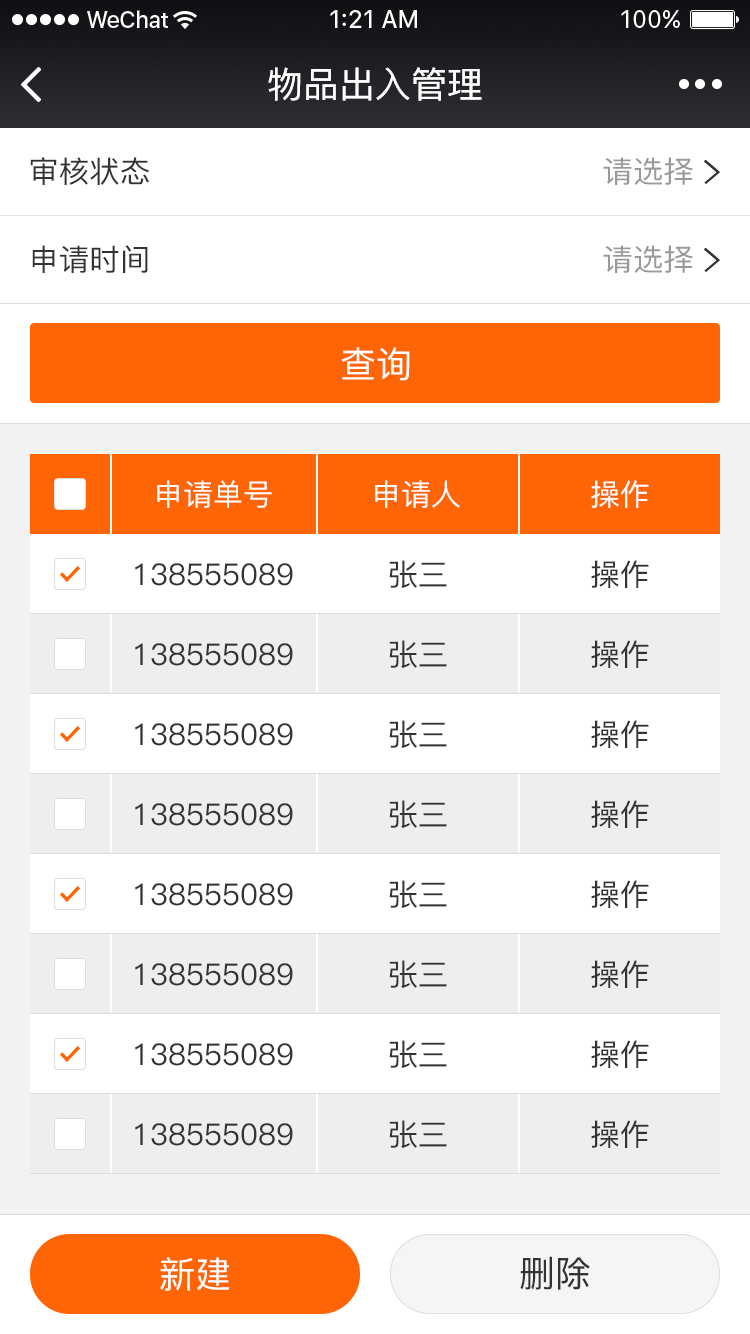
<style>
.page{position:relative;width:750px;height:1334px;background:#ffffff}
.page>*{position:absolute;margin:0}
.t1{font:36px "PingFang-SC-Medium";color:#ffffff}
.t2{font:30px "PingFang-SC-Medium";color:#333333}
.t3{font:30px "PingFang-SC-Medium";color:#999999}
.t4{font:30px "PingFang-SC-Medium";color:#ffffff}
.t5{font:36px "PingFang-SC-Medium";color:#333333}
</style>
<div class="page">
<p class="t1" style="left:268px;top:67px;width:214px;height:34px">物品出入管理</p>
<p class="t2" style="left:30px;top:157px;width:119px;height:28px">审核状态</p>
<p class="t3" style="left:603px;top:157px;width:90px;height:28px">请选择</p>
<p class="t2" style="left:32px;top:245px;width:116px;height:28px">申请时间</p>
<p class="t3" style="left:603px;top:245px;width:90px;height:28px">请选择</p>
<p class="t1" style="left:341px;top:347px;width:69px;height:34px">查询</p>
<p class="t4" style="left:157px;top:480px;width:115px;height:28px">申请单号</p>
<p class="t4" style="left:375px;top:480px;width:85px;height:28px">申请人</p>
<p class="t4" style="left:591px;top:480px;width:58px;height:28px">操作</p>
<p class="t2" style="left:135px;top:563px;width:158px;height:23px">138555089</p>
<p class="t2" style="left:389px;top:560px;width:58px;height:28px">张三</p>
<p class="t2" style="left:591px;top:560px;width:58px;height:28px">操作</p>
<p class="t2" style="left:389px;top:640px;width:58px;height:28px">张三</p>
<p class="t2" style="left:591px;top:640px;width:58px;height:28px">操作</p>
<p class="t2" style="left:135px;top:643px;width:158px;height:23px">138555089</p>
<p class="t2" style="left:135px;top:723px;width:158px;height:23px">138555089</p>
<p class="t2" style="left:389px;top:720px;width:58px;height:28px">张三</p>
<p class="t2" style="left:591px;top:720px;width:58px;height:28px">操作</p>
<p class="t2" style="left:135px;top:803px;width:158px;height:23px">138555089</p>
<p class="t2" style="left:389px;top:800px;width:58px;height:28px">张三</p>
<p class="t2" style="left:591px;top:800px;width:58px;height:28px">操作</p>
<p class="t2" style="left:389px;top:880px;width:58px;height:28px">张三</p>
<p class="t2" style="left:591px;top:880px;width:58px;height:28px">操作</p>
<p class="t2" style="left:135px;top:883px;width:158px;height:23px">138555089</p>
<p class="t2" style="left:135px;top:963px;width:158px;height:23px">138555089</p>
<p class="t2" style="left:389px;top:960px;width:58px;height:28px">张三</p>
<p class="t2" style="left:591px;top:960px;width:58px;height:28px">操作</p>
<p class="t2" style="left:135px;top:1043px;width:158px;height:23px">138555089</p>
<p class="t2" style="left:389px;top:1040px;width:58px;height:28px">张三</p>
<p class="t2" style="left:591px;top:1040px;width:58px;height:28px">操作</p>
<p class="t2" style="left:389px;top:1120px;width:58px;height:28px">张三</p>
<p class="t2" style="left:591px;top:1120px;width:58px;height:28px">操作</p>
<p class="t2" style="left:135px;top:1123px;width:158px;height:23px">138555089</p>
<p class="t1" style="left:160px;top:1257px;width:70px;height:34px">新建</p>
<p class="t5" style="left:520px;top:1256px;width:70px;height:34px">删除</p>
</div>
